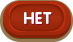
<style>
.page{position:relative;width:73px;height:42px}
.page>*{position:absolute;margin:0}
.t1{font:16px "RotondaC-Bold";letter-spacing:0.04em;color:#ffffff;text-transform:uppercase}
</style>
<div class="page">
<p class="t1" style="left:24px;top:12px;width:28px;height:12px">нет</p>
</div>
